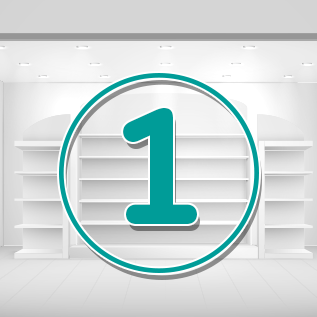
<style>
.page{position:relative;width:317px;height:317px}
.page>*{position:absolute;margin:0}
.t1{font:163.2px "CloudSoft-Bold";color:#009c98}
</style>
<div class="page">
<p class="t1" style="left:123px;top:108px;width:74px;height:116px">1</p>
</div>
